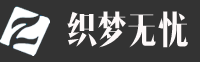
<style>
.page{position:relative;width:200px;height:62px;background:#333333}
.page>*{position:absolute;margin:0}
.t1{font:36px "MFLangSong_Noncommercial-Regular";color:#fdf9f9}
</style>
<div class="page">
<p class="t1" style="left:67px;top:11px;width:121px;height:37px">织梦无忧</p>
</div>
